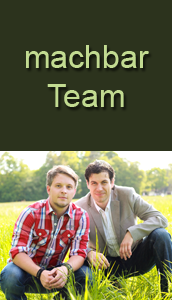
<style>
.page{position:relative;width:172px;height:300px;background:#2c331d}
.page>*{position:absolute;margin:0}
.t1{font:32.1px "ArialMT";color:#c2db91}
</style>
<div class="page">
<p class="t1" style="left:26px;top:45px;width:123px;height:62px;text-align:center">machbar<br>Team</p>
</div>
